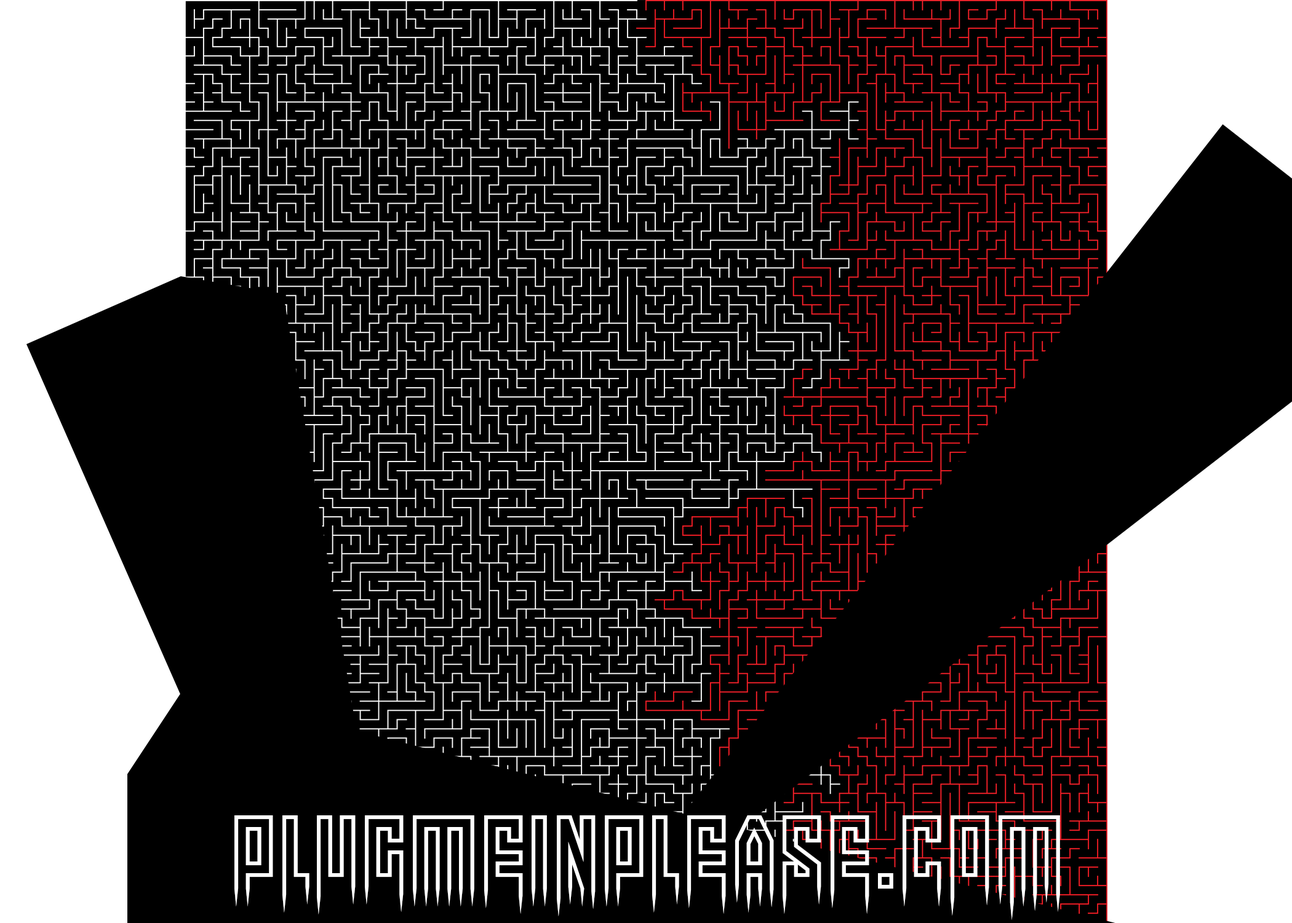
<style>
.page{position:relative;width:1292px;height:923px;background:#000000}
.page>*{position:absolute;margin:0}
.t1{font:92.3px "Morethanhuman";color:#ffffff}
</style>
<div class="page">
<p class="t1" style="left:234px;top:815px;width:826px;height:105px">PlugMeInPlease.Com</p>
</div>
